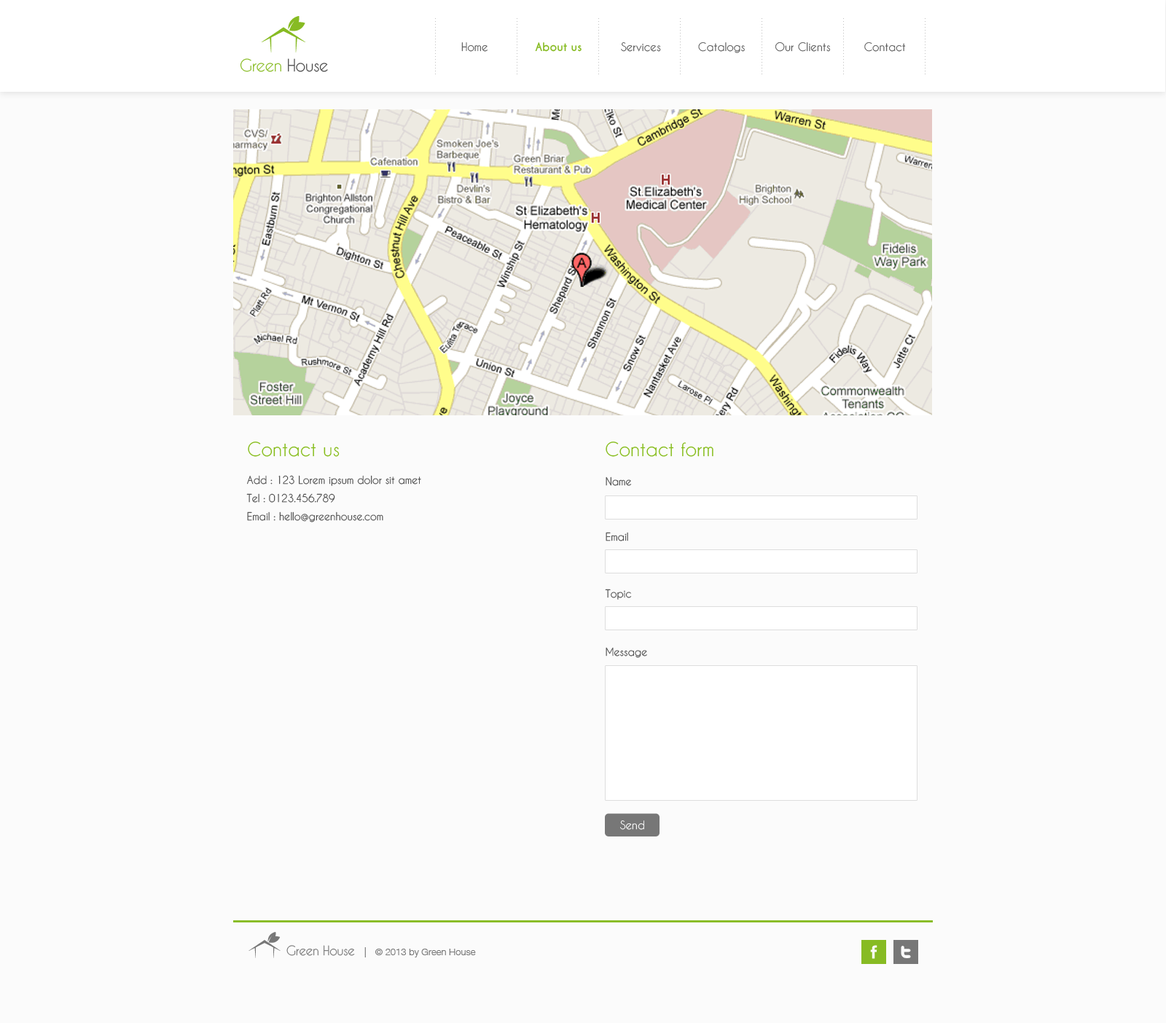
<style>
.page{position:relative;width:1166px;height:1023px;background:#fbfbfb}
.page>*{position:absolute;margin:0}
.t1{font:10.9px "CaviarDreams";color:#555555}
.t2{font:10.9px "CaviarDreams-Bold";color:#87bb23}
.t3{font:16px "CaviarDreams";letter-spacing:-0.025em;color:#87bb23}
.t4{font:16px "CaviarDreams";letter-spacing:-0.025em;color:#444444}
.t5{font:18.2px "CaviarDreams";color:#83bb15}
.t6{font:10.2px/18.2px "CaviarDreams";color:#555555}
.t7{font:10.2px "CaviarDreams";color:#555555}
.t8{font:10.9px "CaviarDreams";color:#ffffff}
.t9{font:12.4px "CaviarDreams";letter-spacing:-0.025em;color:#777777}
.t10{font:9.5px "HelveticaNeueW02-45Light";color:#777777}
.t11{font:10.2px "HelveticaNeueW02-45Light";color:#777777}
</style>
<div class="page">
<p class="t1" style="left:461px;top:42px;width:445px;height:11px">Home         <span class="t2">About us           </span>Services       Catalogs   Our Clients          Contact</p>
<p class="t3" style="left:240px;top:58px;width:88px;height:14px">Green <span class="t4">House</span></p>
<p class="t5" style="left:248px;top:442px;width:92px;height:15px">Contact us</p>
<p class="t5" style="left:605px;top:442px;width:108px;height:15px">Contact form</p>
<p class="t6" style="left:246px;top:475px;width:175px;height:47px">Add : 123 Lorem ipsum dolor sit amet<br>Tel : 0123.456.789<br>Email : hello@greenhouse.com</p>
<p class="t7" style="left:605px;top:476px;width:27px;height:10px">Name</p>
<p class="t7" style="left:605px;top:532px;width:23px;height:9px">Email</p>
<p class="t7" style="left:605px;top:589px;width:27px;height:11px">Topic</p>
<p class="t7" style="left:605px;top:647px;width:42px;height:11px">Message</p>
<p class="t8" style="left:620px;top:820px;width:24px;height:10px">Send</p>
<p class="t9" style="left:286px;top:945px;width:69px;height:11px">Green House</p>
<p class="t10" style="left:364px;top:947px;width:112px;height:10px"><span class="t11">|   </span>© 2013 by Green House</p>
</div>
